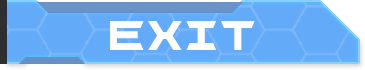
<style>
.page{position:relative;width:365px;height:70px;background:#63aaf9}
.page>*{position:absolute;margin:0}
.t1{font:45.3px "QORE";color:#ffffff}
</style>
<div class="page">
<p class="t1" style="left:110px;top:21px;width:145px;height:29px">EXIT</p>
</div>
